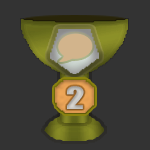
<style>
.page{position:relative;width:150px;height:150px;background:#333333}
.page>*{position:absolute;margin:0}
.t1{font:28.2px "Impact";color:#c4c2bd;scale:1.29 1}
</style>
<div class="page">
<p class="t1" style="left:67px;top:86px;width:17px;height:23px">2</p>
</div>
